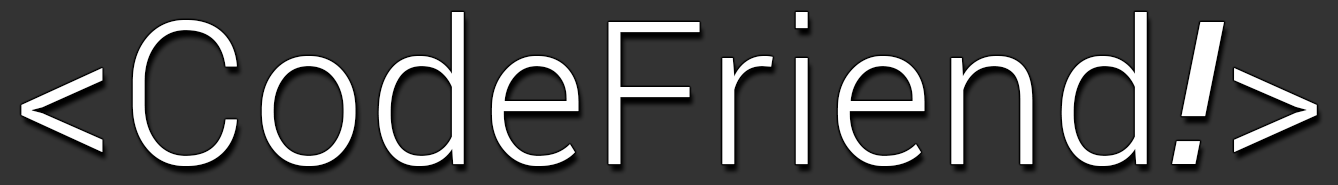
<style>
.page{position:relative;width:1338px;height:185px;background:#333333}
.page>*{position:absolute;margin:0}
.t1{font:200px "Roboto-Light";letter-spacing:0.02em;color:#ffffff}
.t2{font:200px "Roboto-MediumItalic";letter-spacing:0.02em;color:#ffffff}
</style>
<div class="page">
<p class="t1" style="left:21px;top:12px;width:1296px;height:154px">&lt;CodeFriend<span class="t2">!</span>&gt;</p>
</div>
